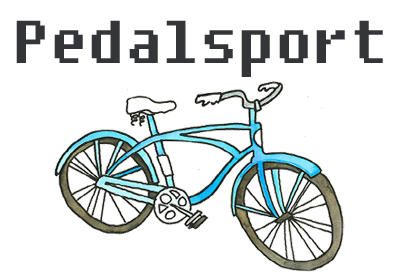
<style>
.page{position:relative;width:397px;height:280px;background:#ffffff}
.page>*{position:absolute;margin:0}
.t1{font:60px "Fixedsys";color:#333539}
</style>
<div class="page">
<p class="t1" style="left:16px;top:20px;width:367px;height:57px">Pedalsport</p>
</div>
